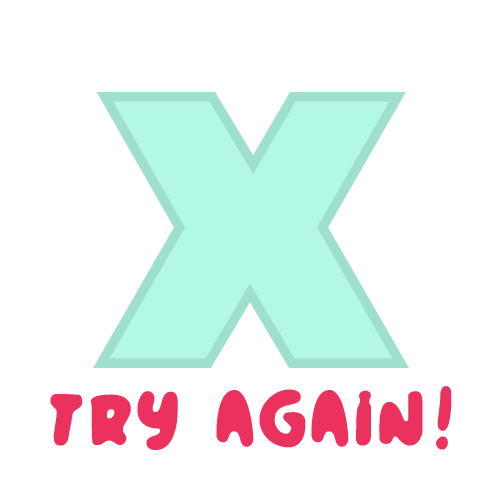
<style>
.page{position:relative;width:500px;height:500px;background:#ffffff}
.page>*{position:absolute;margin:0}
.t1{font:85px "BomberBalloon";letter-spacing:0.08em;color:#eb325f}
</style>
<div class="page">
<p class="t1" style="left:50px;top:386px;width:402px;height:64px">try agaIn!</p>
</div>
